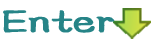
<style>
.page{position:relative;width:151px;height:41px;background:#ffffff}
.page>*{position:absolute;margin:0}
.t1{font:34.6px "HGXS_CNKI";letter-spacing:-0.02em;color:#268487;font-weight:bold;scale:1.43 1}
</style>
<div class="page">
<p class="t1" style="left:3px;top:10px;width:112px;height:23px">Enter</p>
</div>
